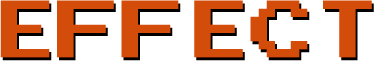
<style>
.page{position:relative;width:374px;height:61px;background:#ffffff}
.page>*{position:absolute;margin:0}
.t1{font:64.5px "PressStartReg";color:#d34c0a}
</style>
<div class="page">
<p class="t1" style="left:0px;top:0px;width:372px;height:58px">EFFECT</p>
<p class="t1" style="left:2px;top:3px;width:372px;height:58px">EFFECT</p>
</div>
